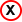
<style>
.page{position:relative;width:22px;height:22px;background:#ffffff}
.page>*{position:absolute;margin:0}
.t1{font:14px "Arial-BoldMT";color:#0a0a0a}
</style>
<div class="page">
<p class="t1" style="left:5px;top:5px;width:10px;height:10px">X</p>
</div>
